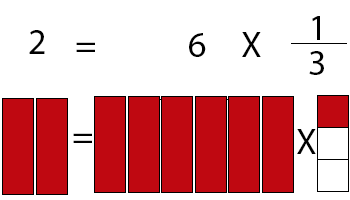
<style>
.page{position:relative;width:350px;height:200px;background:#ffffff}
.page>*{position:absolute;margin:0}
.t1{font:36px "MyriadPro-Regular";color:#000000}
</style>
<div class="page">
<p class="t1" style="left:312px;top:16px;width:8px;height:24px">1</p>
<p class="t1" style="left:29px;top:30px;width:16px;height:24px">2v</p>
<p class="t1" style="left:189px;top:33px;width:17px;height:24px">6</p>
<p class="t1" style="left:242px;top:32px;width:19px;height:25px">X</p>
<p class="t1" style="left:76px;top:42px;width:19px;height:10px">=</p>
<p class="t1" style="left:309px;top:51px;width:15px;height:24px">3</p>
<p class="t1" style="left:73px;top:133px;width:19px;height:10px">=</p>
<p class="t1" style="left:297px;top:129px;width:19px;height:25px">X</p>
</div>
